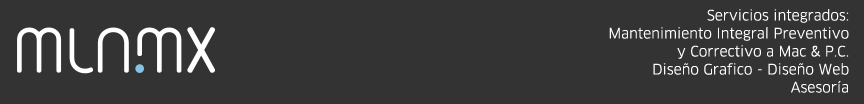
<style>
.page{position:relative;width:864px;height:104px;background:#333333}
.page>*{position:absolute;margin:0}
.t1{font:14px/18px "ClanLF-Book";color:#ffffff}
</style>
<div class="page">
<p class="t1" style="left:609px;top:9px;width:240px;height:84px;text-align:right">Servicios integrados:<br>Mantenimiento Integral Preventivo<br>y Correctivo a Mac &amp; P.C.<br>Diseño Grafico - Diseño Web<br>Asesoría</p>
</div>
